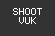
<style>
.page{position:relative;width:55px;height:36px;background:#333333}
.page>*{position:absolute;margin:0}
.t1{font:8px "Terminal";color:#ffffff}
</style>
<div class="page">
<p class="t1" style="left:13px;top:8px;width:29px;height:16px;text-align:center">SHOOT<br>VUK</p>
</div>
